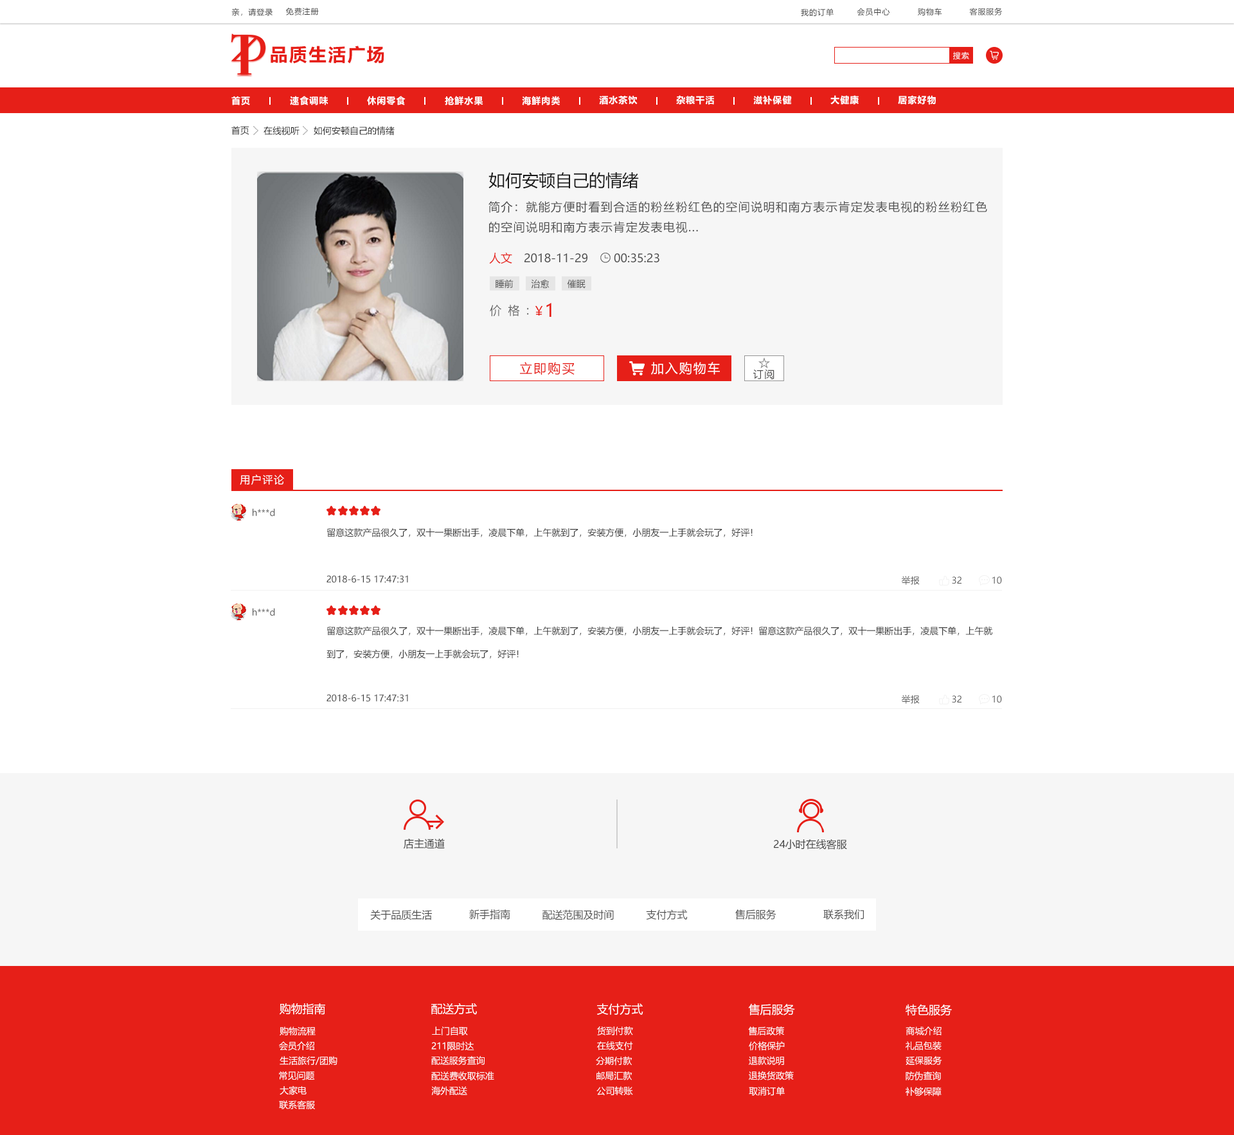
<style>
.page{position:relative;width:1234px;height:1135px;background:#ffffff}
.page>*{position:absolute;margin:0}
.t1{font:7.7px "MicrosoftYaHei";letter-spacing:0.08em;color:#404040}
.t2{font:18px "MicrosoftYaHei-Bold";letter-spacing:0.08em;color:#e61f18}
.t3{font:7.7px "MicrosoftYaHei";letter-spacing:0.08em;color:#ffffff}
.t4{font:9px "MicrosoftYaHei-Bold";letter-spacing:0.08em;color:#ffffff}
.t5{font:9px "MicrosoftYaHei";color:#202020}
.t6{font:16.7px "MicrosoftYaHei";color:#181818}
.t7{font:11.6px "MicrosoftYaHei";letter-spacing:0.08em;color:#505050}
.t8{font:11.6px "MicrosoftYaHei";letter-spacing:0.08em;color:#404040}
.t9{font:11.6px "MicrosoftYaHei";color:#e61f18}
.t10{font:11.6px "MicrosoftYaHei";color:#505050}
.t11{font:9px "MicrosoftYaHei";color:#505050}
.t12{font:11.6px "MicrosoftYaHei";letter-spacing:0.58em;color:#646464}
.t13{font:18px "MicrosoftYaHei";letter-spacing:0.08em;color:#e61f18}
.t14{font:12.9px "MicrosoftYaHei";letter-spacing:0.1em;color:#e61f18}
.t15{font:12.9px "MicrosoftYaHei";letter-spacing:0.1em;color:#ffffff}
.t16{font:10.3px "MicrosoftYaHei";letter-spacing:0.1em;color:#4c4b4b}
.t17{font:10.3px "MicrosoftYaHei";letter-spacing:0.1em;color:#ffffff}
.t18{font:9px "MicrosoftYaHei";color:#5a5a5a}
.t19{font:9px "MicrosoftYaHei";color:#393939}
.t20{font:9px "MicrosoftYaHei";color:#595959}
.t21{font:9px/23.1px "MicrosoftYaHei";color:#393939}
.t22{font:10.3px "MicrosoftYaHei";color:#404040}
.t23{font:10.3px "MicrosoftYaHei";color:#505050}
.t24{font:11.6px "MicrosoftYaHei";color:#ffffff}
.t25{font:9px "MicrosoftYaHei";color:#ffffff}
</style>
<div class="page">
<p class="t1" style="left:231px;top:8px;width:42px;height:8px">亲，请登录</p>
<p class="t1" style="left:285px;top:8px;width:34px;height:7px">免费注册</p>
<p class="t1" style="left:801px;top:8px;width:33px;height:8px">我的订单</p>
<p class="t1" style="left:857px;top:8px;width:33px;height:8px">会员中心</p>
<p class="t1" style="left:918px;top:8px;width:24px;height:8px">购物车</p>
<p class="t1" style="left:969px;top:8px;width:34px;height:7px">客服服务</p>
<p class="t2" style="left:271px;top:46px;width:113px;height:18px">品质生活广场</p>
<p class="t3" style="left:953px;top:51px;width:16px;height:9px">搜索</p>
<p class="t4" style="left:231px;top:96px;width:19px;height:9px">首页</p>
<p class="t4" style="left:290px;top:96px;width:38px;height:9px">速食调味</p>
<p class="t4" style="left:367px;top:96px;width:39px;height:9px">休闲零食</p>
<p class="t4" style="left:445px;top:96px;width:38px;height:9px">抢鲜水果</p>
<p class="t4" style="left:522px;top:96px;width:38px;height:9px">海鲜肉类</p>
<p class="t4" style="left:599px;top:96px;width:39px;height:9px">酒水茶饮</p>
<p class="t4" style="left:676px;top:95px;width:38px;height:10px">杂粮干活</p>
<p class="t4" style="left:753px;top:95px;width:39px;height:10px">滋补保健</p>
<p class="t4" style="left:831px;top:95px;width:28px;height:10px">大健康</p>
<p class="t4" style="left:898px;top:95px;width:38px;height:10px">居家好物</p>
<p class="t5" style="left:231px;top:126px;width:18px;height:9px">首页</p>
<p class="t5" style="left:264px;top:126px;width:36px;height:10px">在线视听</p>
<p class="t5" style="left:314px;top:126px;width:81px;height:10px">如何安顿自己的情绪</p>
<p class="t6" style="left:489px;top:172px;width:150px;height:17px">如何安顿自己的情绪</p>
<p class="t7" style="left:489px;top:201px;width:498px;height:32px"><span class="t8">简介：</span>就能方便时看到合适的粉丝粉红色的空间说明和南方表示肯定发表电视的粉丝粉红色<br>的空间说明和南方表示肯定发表电视...</p>
<p class="t9" style="left:489px;top:253px;width:23px;height:11px">人文</p>
<p class="t10" style="left:525px;top:253px;width:63px;height:10px">2018-11-29</p>
<p class="t10" style="left:614px;top:253px;width:46px;height:10px">00:35:23</p>
<p class="t11" style="left:496px;top:280px;width:18px;height:9px">睡前</p>
<p class="t11" style="left:531px;top:279px;width:19px;height:10px">治愈</p>
<p class="t11" style="left:567px;top:280px;width:19px;height:9px">催眠</p>
<p class="t12" style="left:490px;top:305px;width:39px;height:11px">价格:</p>
<p class="t13" style="left:546px;top:303px;width:6px;height:14px">1</p>
<p class="t14" style="left:520px;top:362px;width:55px;height:13px">立即购买</p>
<p class="t15" style="left:651px;top:362px;width:69px;height:13px">加入购物车</p>
<p class="t16" style="left:753px;top:369px;width:22px;height:10px">订阅</p>
<p class="t17" style="left:240px;top:474px;width:44px;height:11px">用户评论</p>
<p class="t18" style="left:253px;top:509px;width:22px;height:7px">h***d</p>
<p class="t19" style="left:327px;top:528px;width:426px;height:9px">留意这款产品很久了，双十一果断出手，凌晨下单，上午就到了，安装方便，小朋友一上手就会玩了，好评！</p>
<p class="t19" style="left:327px;top:575px;width:81px;height:8px">2018-6-15 17:47:31</p>
<p class="t20" style="left:901px;top:576px;width:101px;height:9px">举报            32           10</p>
<p class="t18" style="left:253px;top:608px;width:22px;height:8px">h***d</p>
<p class="t21" style="left:327px;top:626px;width:666px;height:33px">留意这款产品很久了，双十一果断出手，凌晨下单，上午就到了，安装方便，小朋友一上手就会玩了，好评！留意这款产品很久了，双十一果断出手，凌晨下单，上午就<br>到了，安装方便，小朋友一上手就会玩了，好评！</p>
<p class="t19" style="left:327px;top:694px;width:81px;height:8px">2018-6-15 17:47:31</p>
<p class="t20" style="left:901px;top:695px;width:101px;height:9px">举报            32           10</p>
<p class="t22" style="left:404px;top:838px;width:41px;height:11px">店主通道</p>
<p class="t22" style="left:774px;top:839px;width:73px;height:11px">24小时在线客服</p>
<p class="t23" style="left:370px;top:910px;width:62px;height:11px">关于品质生活</p>
<p class="t23" style="left:469px;top:909px;width:41px;height:11px">新手指南</p>
<p class="t23" style="left:543px;top:910px;width:71px;height:11px">配送范围及时间</p>
<p class="t23" style="left:646px;top:910px;width:42px;height:10px">支付方式</p>
<p class="t23" style="left:735px;top:910px;width:42px;height:10px">售后服务</p>
<p class="t23" style="left:824px;top:910px;width:40px;height:10px">联系我们</p>
<p class="t24" style="left:280px;top:1004px;width:45px;height:11px">购物指南</p>
<p class="t24" style="left:431px;top:1004px;width:46px;height:11px">配送方式</p>
<p class="t24" style="left:597px;top:1004px;width:47px;height:11px">支付方式</p>
<p class="t24" style="left:748px;top:1004px;width:47px;height:12px">售后服务</p>
<p class="t24" style="left:906px;top:1004px;width:46px;height:12px">特色服务</p>
<p class="t25" style="left:280px;top:1027px;width:36px;height:9px">购物流程</p>
<p class="t25" style="left:432px;top:1027px;width:36px;height:9px">上门自取</p>
<p class="t25" style="left:597px;top:1027px;width:36px;height:9px">货到付款</p>
<p class="t25" style="left:748px;top:1027px;width:36px;height:9px">售后政策</p>
<p class="t25" style="left:906px;top:1027px;width:36px;height:9px">商城介绍</p>
<p class="t25" style="left:279px;top:1041px;width:35px;height:10px">会员介绍</p>
<p class="t25" style="left:431px;top:1041px;width:43px;height:10px">211限时达</p>
<p class="t25" style="left:597px;top:1041px;width:36px;height:9px">在线支付</p>
<p class="t25" style="left:749px;top:1041px;width:36px;height:10px">价格保护</p>
<p class="t25" style="left:906px;top:1041px;width:36px;height:9px">礼品包装</p>
<p class="t25" style="left:280px;top:1056px;width:58px;height:9px">生活旅行/团购</p>
<p class="t25" style="left:431px;top:1056px;width:54px;height:9px">配送服务查询</p>
<p class="t25" style="left:596px;top:1056px;width:36px;height:10px">分期付款</p>
<p class="t25" style="left:749px;top:1056px;width:35px;height:10px">退款说明</p>
<p class="t25" style="left:906px;top:1056px;width:36px;height:9px">延保服务</p>
<p class="t25" style="left:279px;top:1072px;width:36px;height:9px">常见问题</p>
<p class="t25" style="left:431px;top:1072px;width:63px;height:9px">配送费收取标准</p>
<p class="t25" style="left:597px;top:1072px;width:35px;height:9px">邮局汇款</p>
<p class="t25" style="left:749px;top:1071px;width:45px;height:10px">退换货政策</p>
<p class="t25" style="left:906px;top:1072px;width:35px;height:9px">防伪查询</p>
<p class="t25" style="left:280px;top:1086px;width:27px;height:9px">大家电</p>
<p class="t25" style="left:431px;top:1086px;width:36px;height:9px">海外配送</p>
<p class="t25" style="left:597px;top:1086px;width:36px;height:10px">公司转账</p>
<p class="t25" style="left:749px;top:1087px;width:36px;height:9px">取消订单</p>
<p class="t25" style="left:906px;top:1087px;width:36px;height:10px">补够保障</p>
<p class="t25" style="left:279px;top:1101px;width:36px;height:9px">联系客服</p>
</div>
